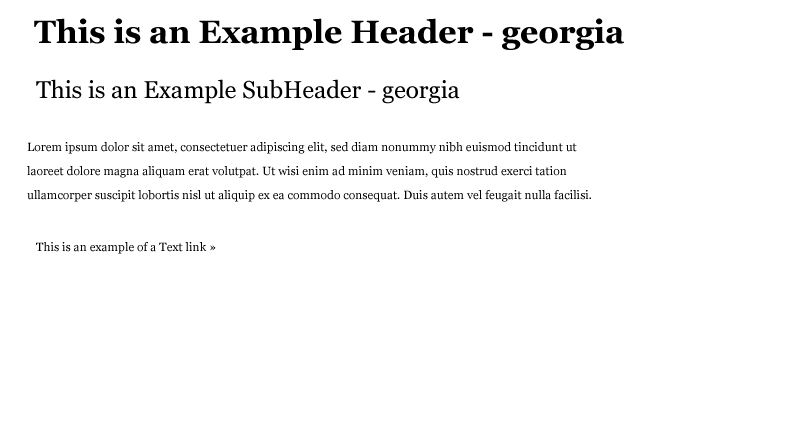
<style>
.page{position:relative;width:801px;height:436px;background:#ffffff}
.page>*{position:absolute;margin:0}
.t1{font:32px "Georgia-Bold";color:#000000}
.t2{font:24px "Georgia";color:#000000}
.t3{font:12px/24px "Georgia";color:#000000}
.t4{font:12px "Georgia";color:#000000}
</style>
<div class="page">
<p class="t1" style="left:34px;top:18px;width:590px;height:32px">This is an Example Header - georgia</p>
<p class="t2" style="left:36px;top:79px;width:424px;height:25px">This is an Example SubHeader - georgia</p>
<p class="t3" style="left:27px;top:142px;width:564px;height:60px">Lorem ipsum dolor sit amet, consectetuer adipiscing elit, sed diam nonummy nibh euismod tincidunt ut laoreet dolore magna aliquam erat volutpat. Ut wisi enim ad minim veniam, quis nostrud exerci tation ullamcorper suscipit lobortis nisl ut aliquip ex ea commodo consequat. Duis autem vel feugait nulla facilisi.</p>
<p class="t4" style="left:36px;top:242px;width:180px;height:12px">This is an example of a Text link »</p>
</div>
